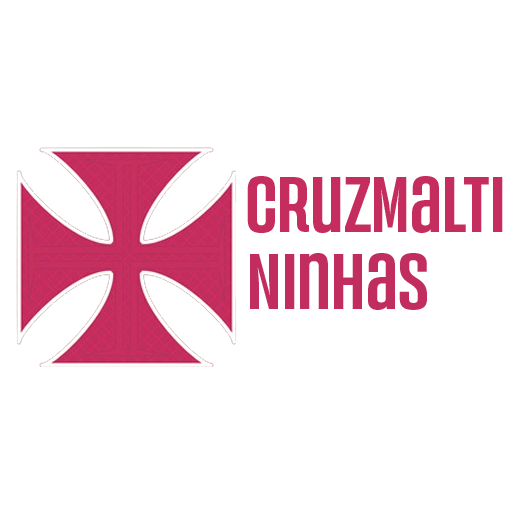
<style>
.page{position:relative;width:512px;height:512px;background:#ffffff}
.page>*{position:absolute;margin:0}
.t1{font:78.7px "Versus-Medium";color:#c42d5d}
.t2{font:78.7px "Versus-Medium";color:#c22d5f}
</style>
<div class="page">
<p class="t1" style="left:247px;top:176px;width:256px;height:57px">CruzMalTi</p>
<p class="t2" style="left:250px;top:253px;width:177px;height:57px">Ninhas</p>
</div>
